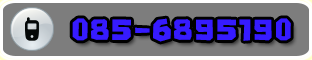
<style>
.page{position:relative;width:312px;height:60px;background:#7d7d7d}
.page>*{position:absolute;margin:0}
.t1{font:36px "-LayijiTaMaiTine1";color:#361bff}
</style>
<div class="page">
<p class="t1" style="left:72px;top:18px;width:219px;height:24px">085-6895190</p>
</div>
